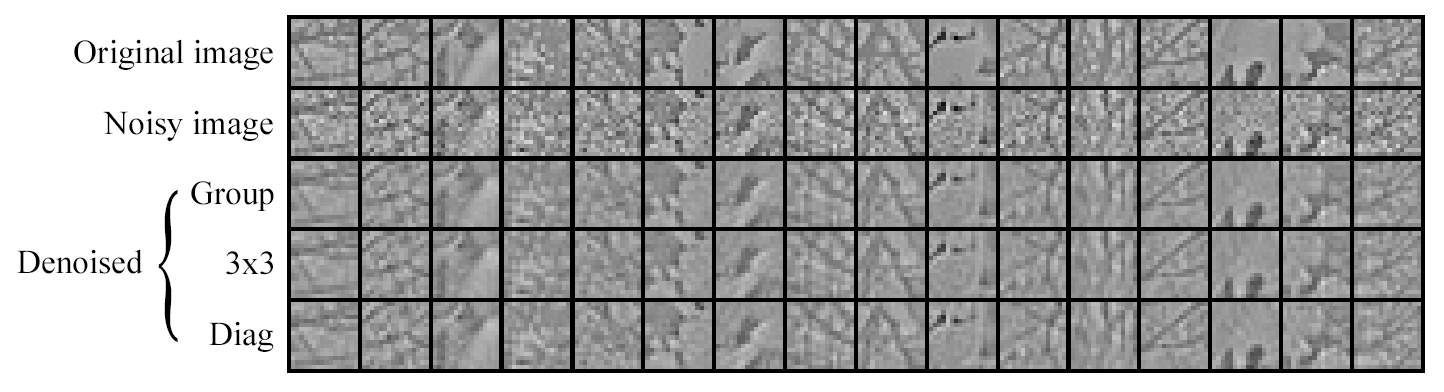
<style>
.page{position:relative;width:1444px;height:392px;background:#ffffff}
.page>*{position:absolute;margin:0}
.t1{font:33.3px "TimesNewRomanPSMT";color:#000000}
.t2{font:167.1px "TimesNewRomanPSMT";color:#000000;scale:0.41 1}
</style>
<div class="page">
<p class="t1" style="left:74px;top:39px;width:199px;height:31px">Original image</p>
<p class="t1" style="left:103px;top:110px;width:170px;height:31px">Noisy image</p>
<p class="t1" style="left:191px;top:181px;width:83px;height:30px">Group</p>
<p class="t2" style="left:158px;top:190px;width:20px;height:152px;rotate:180deg">}</p>
<p class="t1" style="left:17px;top:249px;width:126px;height:25px">Denoised</p>
<p class="t1" style="left:226px;top:251px;width:47px;height:24px">3x3</p>
<p class="t1" style="left:209px;top:321px;width:65px;height:31px">Diag</p>
</div>
